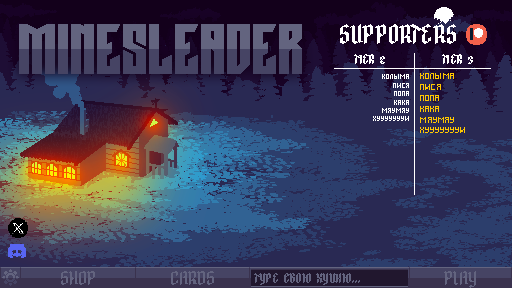
<style>
.page{position:relative;width:512px;height:288px;background:#292953}
.page>*{position:absolute;margin:0}
.t1{font:17.7px "DreiFraktur";color:#ffffff}
.t2{font:9px "DreiFraktur";color:#ffffff}
.t3{font:7px "BITach";color:#ffffff}
.t4{font:9px "BITach";color:#ffc800}
.t5{font:13px "DreiFraktur";color:#63647f}
.t6{font:9px "DreiFraktur";color:#63647f}
</style>
<div class="page">
<p class="t1" style="left:340px;top:24px;width:116px;height:20px">SUPPORTERS</p>
<p class="t2" style="left:354px;top:54px;width:119px;height:10px">TIER 2            TIER 3</p>
<p class="t3" style="left:373px;top:74px;width:36px;height:47px;text-align:right">колыма<br>пися<br>попа<br>кака<br>мяумяу<br>хуууууууй</p>
<p class="t4" style="left:420px;top:73px;width:45px;height:60px">колыма<br>пися<br>попа<br>кака<br>мяумяу<br>хуууууууй</p>
<p class="t5" style="left:61px;top:271px;width:34px;height:14px">SHOP</p>
<p class="t5" style="left:171px;top:271px;width:43px;height:14px">CARDS</p>
<p class="t6" style="left:254px;top:273px;width:106px;height:12px">TYPE СВОЮ ХУЙНЮ...</p>
<p class="t5" style="left:444px;top:271px;width:32px;height:17px">PLAY</p>
</div>
